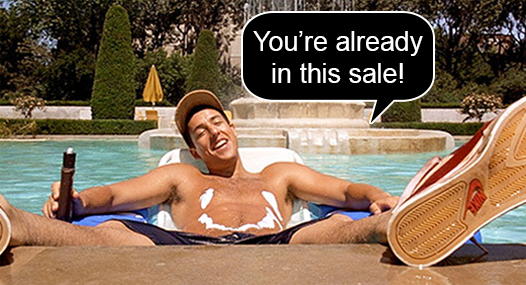
<style>
.page{position:relative;width:526px;height:285px}
.page>*{position:absolute;margin:0}
.t1{font:26.5px/31.8px "ArialMT";color:#ffffff}
</style>
<div class="page">
<p class="t1" style="left:253px;top:31px;width:170px;height:52px;text-align:center">You’re already<br>in this sale!</p>
</div>
